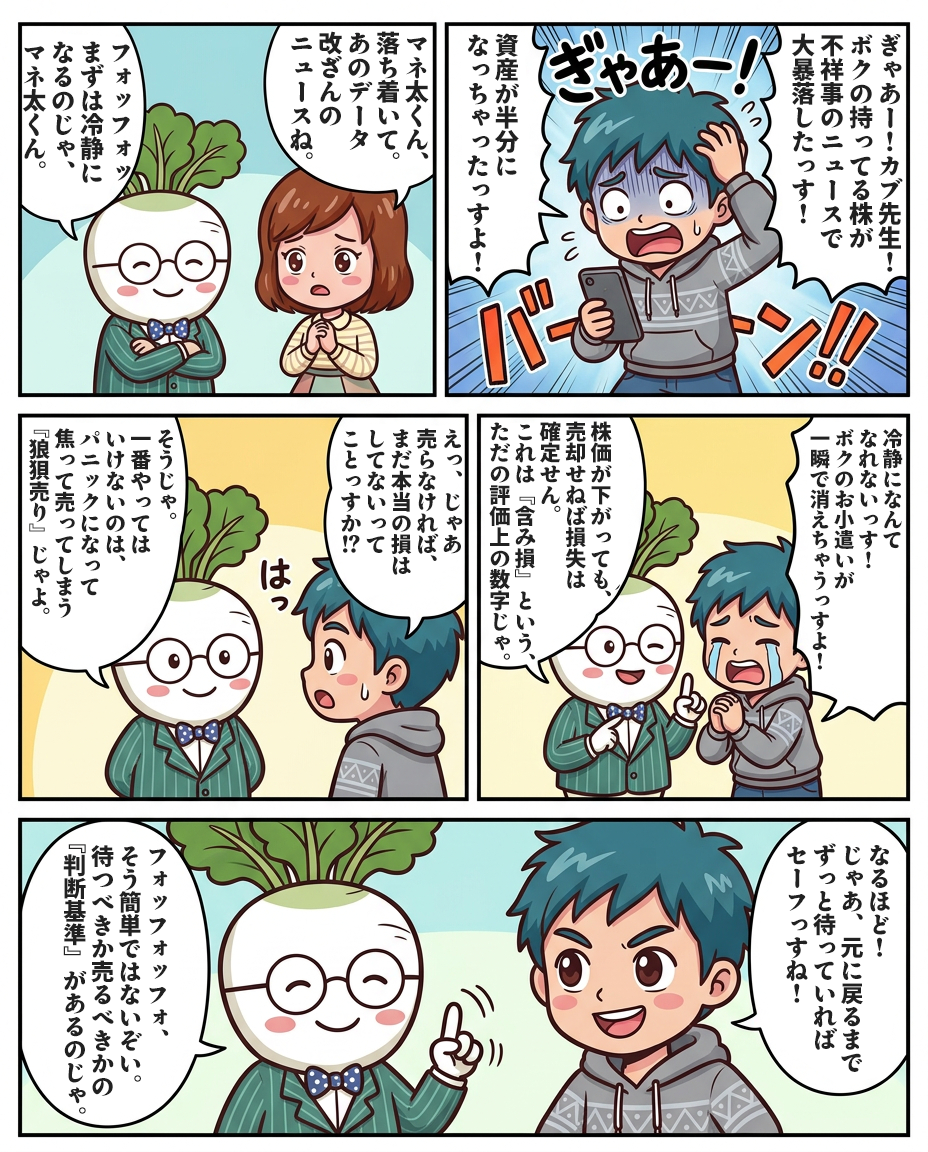
<style>
.page{position:relative;width:928px;height:1152px;background:#ffffff}
.page>*{position:absolute;margin:0}
.t1{font:24.1px "TenMinchoAntique-Heavy";color:#212121}
.t2{font:21.1px "TenMinchoAntique-Heavy";color:#212121}
.t3{font:20.3px "TenMinchoAntique-Heavy";color:#212121}
.t4{font:23px "TenMinchoAntique-Heavy";color:#212121}
</style>
<div class="page">
<p class="t1" style="left:22px;top:41px;width:109px;height:142px">フォッフォッ<br>まずは冷静に<br>なるのじゃ、<br>マネ太くん。</p>
<p class="t1" style="left:290px;top:31px;width:139px;height:128px">マネ太くん、<br>落ち着いて。<br>あのデータ<br>改ざんの<br>ニュースね。</p>
<p class="t1" style="left:467px;top:33px;width:52px;height:239px">資産が半分に<br>なっちゃったっすよ！</p>
<p class="t1" style="left:791px;top:33px;width:112px;height:239px">ぎゃあー！カブ先生！<br>ボクの持ってる株が<br>不祥事のニュースで<br>大暴落したっす！</p>
<p class="t2" style="left:489px;top:421px;width:123px;height:239px">株価が下がっても、<br>売却せねば損失は<br>確定せん。<br>これは『含み損』という、<br>ただの評価上の数字じゃ。</p>
<p class="t2" style="left:29px;top:428px;width:148px;height:190px">そうじゃ。<br>一番やっては<br>いけないのは、<br>パニックになって<br>焦って売ってしまう<br>『狼狽売り』じゃよ。</p>
<p class="t2" style="left:341px;top:428px;width:122px;height:147px">えっ、じゃあ<br>売らなければ、<br>まだ本当の損は<br>してないって<br>ことっすか！？</p>
<p class="t3" style="left:810px;top:428px;width:93px;height:242px">冷静になんて<br>なれないっす！<br>ボクのお小遣いが<br>一瞬で消えちゃうっすよ！</p>
<p class="t4" style="left:63px;top:844px;width:106px;height:270px">フォッフォッフォ、<br>そう簡単ではないぞい。<br>待つべきか売るべきかの<br>『判断基準』があるのじゃ。</p>
<p class="t4" style="left:786px;top:843px;width:104px;height:229px">なるほど！<br>じゃあ、元に戻るまで<br>ずっと待っていれば<br>セーフっすね！</p>
</div>
